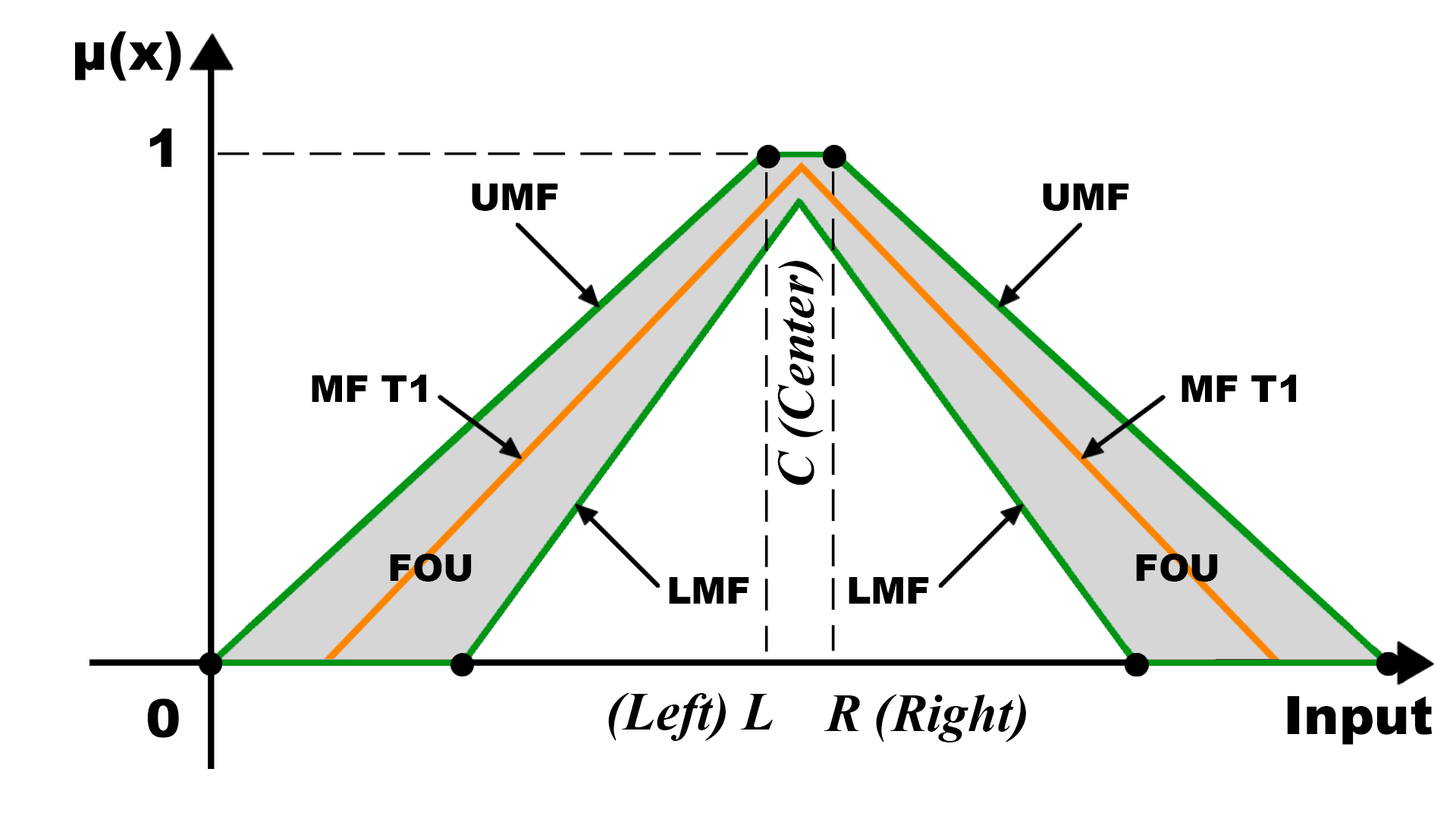
<style>
.page{position:relative;width:1456px;height:819px;background:#ffffff}
.page>*{position:absolute;margin:0}
.t1{font:52.8px "Arial-Black";color:#000000}
.t2{font:36.9px "Arial-Black";color:#000000}
.t3{font:52.7px "TimesNewRomanPS-BoldItalicMT";color:#000000}
.t4{font:52.8px "TimesNewRomanPS-BoldItalicMT";color:#000000}
</style>
<div class="page">
<p class="t1" style="left:75px;top:31px;width:106px;height:50px">μ(x)</p>
<p class="t1" style="left:149px;top:128px;width:23px;height:39px">1</p>
<p class="t2" style="left:472px;top:184px;width:86px;height:27px">UMF</p>
<p class="t2" style="left:1043px;top:184px;width:86px;height:27px">UMF</p>
<p class="t3" style="left:777px;top:261px;width:47px;height:224px;rotate:-90deg">C (Center)</p>
<p class="t2" style="left:312px;top:375px;width:115px;height:27px">MF T1</p>
<p class="t2" style="left:1181px;top:375px;width:116px;height:27px">MF T1</p>
<p class="t2" style="left:390px;top:554px;width:82px;height:28px">FOU</p>
<p class="t2" style="left:1136px;top:554px;width:82px;height:28px">FOU</p>
<p class="t2" style="left:669px;top:577px;width:80px;height:27px">LMF</p>
<p class="t2" style="left:849px;top:577px;width:80px;height:27px">LMF</p>
<p class="t1" style="left:147px;top:698px;width:32px;height:40px">0</p>
<p class="t4" style="left:608px;top:692px;width:165px;height:49px">(Left) L</p>
<p class="t4" style="left:824px;top:694px;width:202px;height:48px">R (Right)</p>
<p class="t1" style="left:1287px;top:696px;width:145px;height:49px">Input</p>
</div>
